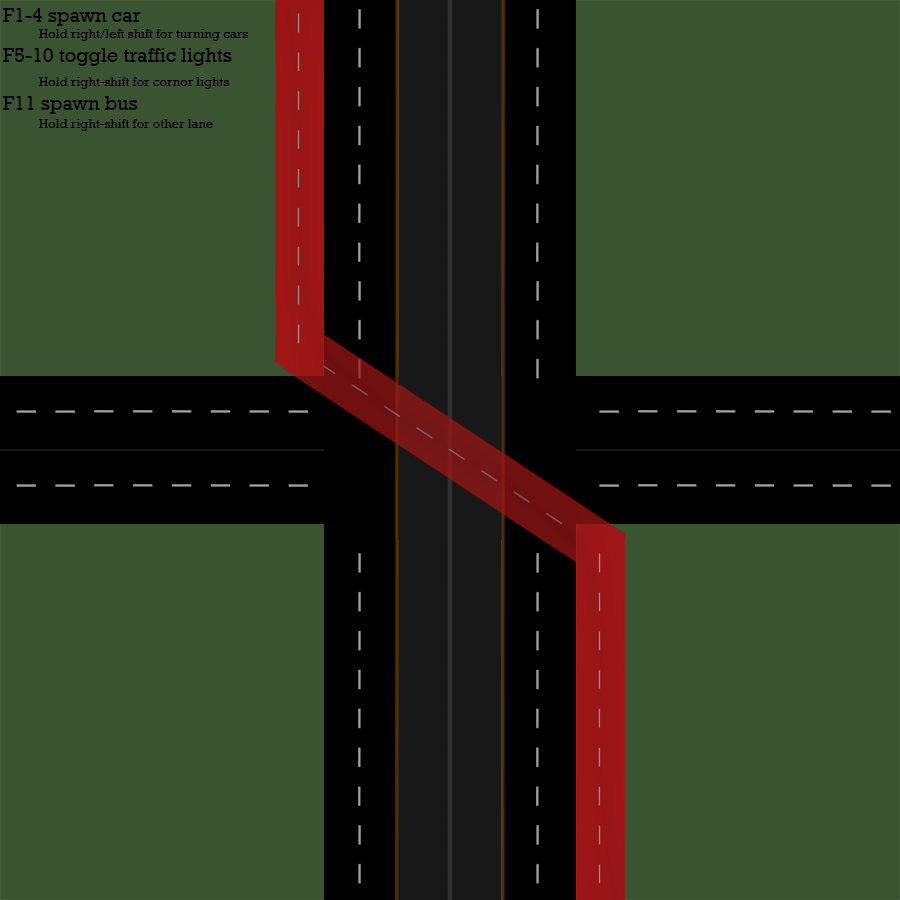
<style>
.page{position:relative;width:900px;height:900px;background:#3a5331}
.page>*{position:absolute;margin:0}
.t1{font:13px "Rockwell";color:#000000}
.t2{font:20px "Rockwell";color:#000000}
</style>
<div class="page">
<p class="t1" style="left:3px;top:8px;width:245px;height:123px"><span class="t2">F1-4 spawn car<br></span> Hold right/left shift for turning cars<br><span class="t2">F5-10 toggle traffic lights<br> </span>Hold right-shift for cornor lights<br><span class="t2">F11 spawn bus<br> </span>Hold right-shift for other lane</p>
</div>
